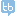
<style>
.page{position:relative;width:16px;height:16px;background:#ffffff}
.page>*{position:absolute;margin:0}
.t1{font:14px "REZ";color:#fcfdfe}
.t2{font:12px "REZ";color:#fcfdfe}
</style>
<div class="page">
<p class="t1" style="left:3px;top:2px;width:4px;height:9px">t</p>
<p class="t2" style="left:8px;top:3px;width:5px;height:8px">b</p>
</div>
